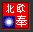
<style>
.page{position:relative;width:33px;height:32px;background:#f20000}
.page>*{position:absolute;margin:0}
.t1{font:10.4px "SimSun";color:#ffffff}
.t2{font:11.7px "SimSun";color:#ffffff}
</style>
<div class="page">
<p class="t1" style="left:6px;top:4px;width:19px;height:9px">北欧</p>
<p class="t2" style="left:16px;top:15px;width:11px;height:12px">奉</p>
</div>
